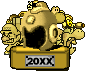
<style>
.page{position:relative;width:85px;height:71px;background:#ffffff}
.page>*{position:absolute;margin:0}
.t1{font:9.5px "InterTight-Black";letter-spacing:-0.04em;color:#000000}
</style>
<div class="page">
<p class="t1" style="left:27px;top:57px;width:26px;height:8px">20XX</p>
</div>
